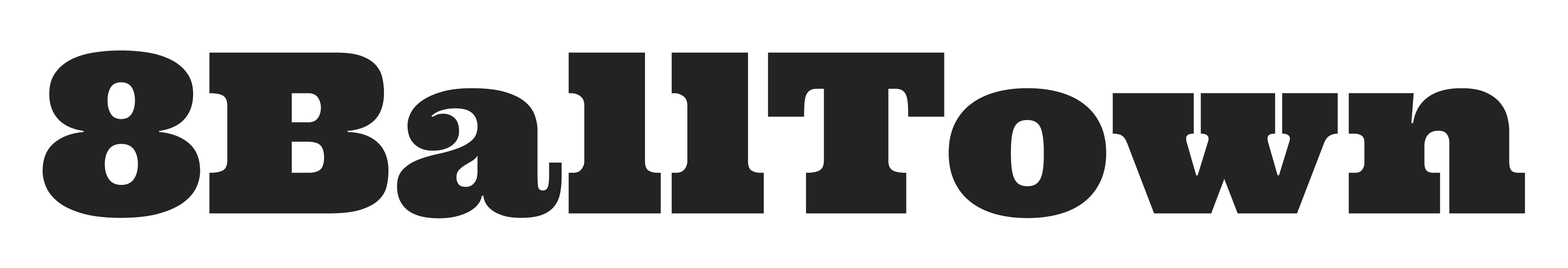
<style>
.page{position:relative;width:1568px;height:268px;background:#ffffff}
.page>*{position:absolute;margin:0}
.t1{font:223.5px "Ultra-Regular";color:#232323}
</style>
<div class="page">
<p class="t1" style="left:42px;top:51px;width:1483px;height:168px">8BallTown</p>
</div>
